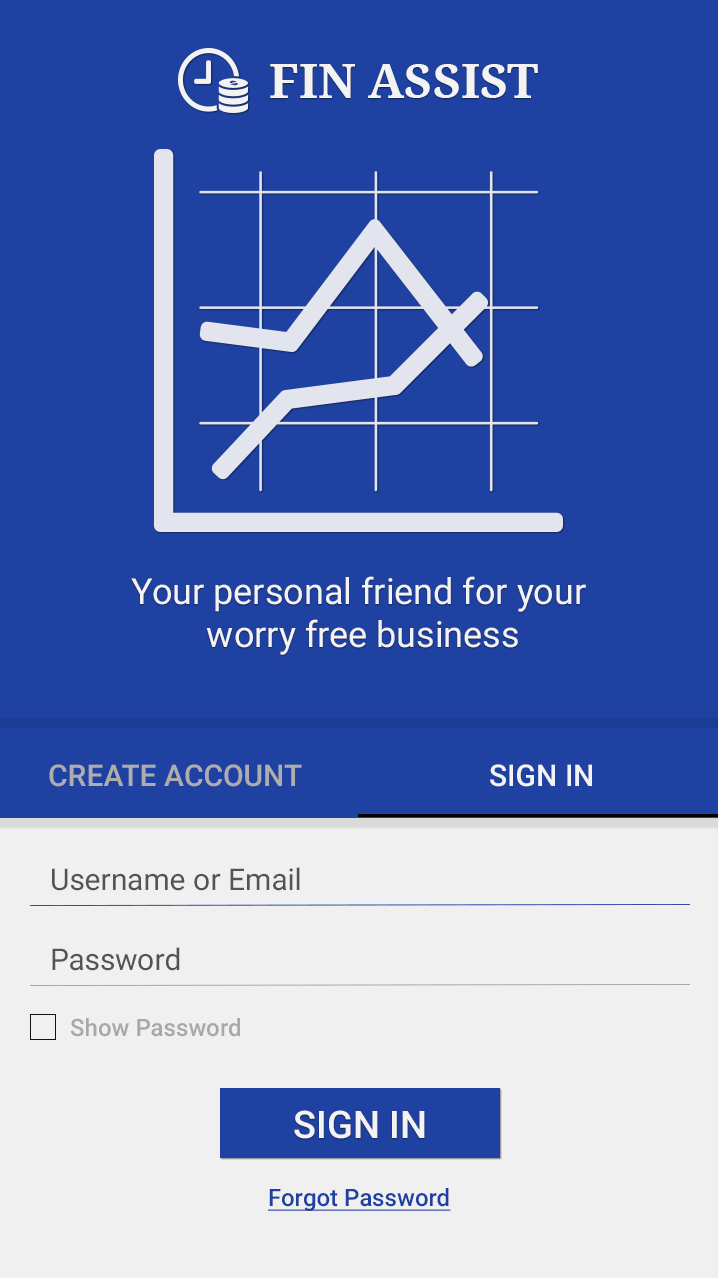
<style>
.page{position:relative;width:720px;height:1280px;background:#1f41a1}
.page>*{position:absolute;margin:0}
.t1{font:48px "NotoSerif-Bold";color:#f3f3f3}
.t2{font:36px "Roboto-Regular";color:#f3f3f3}
.t3{font:30px "Roboto-Medium";color:#adadad}
.t4{font:30px "Roboto-Medium";color:#f3f3f3}
.t5{font:30px "Roboto-Regular";letter-spacing:0.005em;color:#545454}
.t6{font:24px "Roboto-Medium";color:#a8a8a8}
.t7{font:38px "Roboto-Medium";color:#f3f3f3}
.t8{font:24px "Roboto-Medium";color:#1f41a1;text-decoration:underline}
</style>
<div class="page">
<p class="t1" style="left:270px;top:64px;width:268px;height:34px">FIN ASSIST</p>
<p class="t2" style="left:131px;top:576px;width:455px;height:79px;text-align:center">Your personal friend for your <br>worry free business</p>
<p class="t3" style="left:49px;top:764px;width:253px;height:23px">CREATE ACCOUNT</p>
<p class="t4" style="left:490px;top:764px;width:102px;height:23px">SIGN IN</p>
<p class="t5" style="left:52px;top:867px;width:248px;height:24px">Username or Email</p>
<p class="t5" style="left:52px;top:947px;width:128px;height:24px">Password</p>
<p class="t6" style="left:70px;top:1018px;width:170px;height:19px">Show Password</p>
<p class="t7" style="left:294px;top:1110px;width:131px;height:29px">SIGN IN</p>
<p class="t8" style="left:268px;top:1188px;width:183px;height:23px">Forgot Password</p>
</div>
